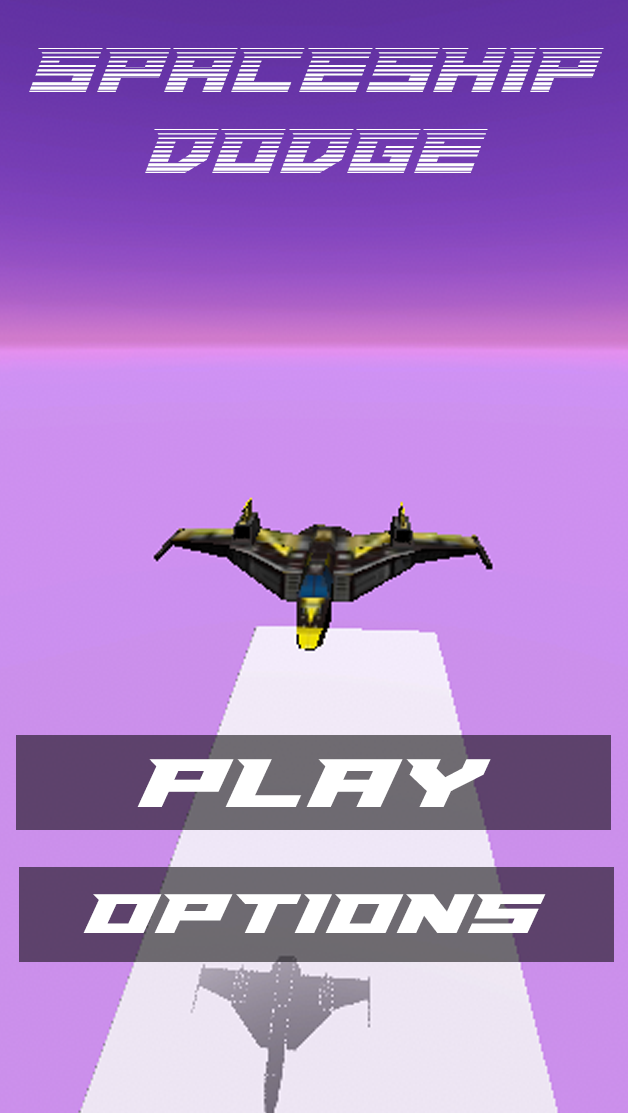
<style>
.page{position:relative;width:628px;height:1113px}
.page>*{position:absolute;margin:0}
.t1{font:68px "PaladinsGradient";color:#ffffff}
.t2{font:74px "PaladinsExpanded";color:#ffffff}
.t3{font:60px "PaladinsExpanded";color:#ffffff}
</style>
<div class="page">
<p class="t1" style="left:29px;top:48px;width:575px;height:125px;text-align:center">SPACESHIP<br>DODGE</p>
<p class="t2" style="left:137px;top:759px;width:354px;height:48px">PLAY</p>
<p class="t3" style="left:83px;top:894px;width:463px;height:39px">OPTIONS</p>
</div>
